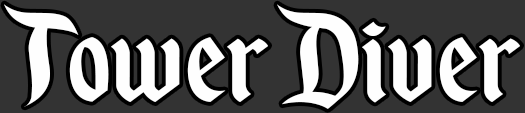
<style>
.page{position:relative;width:525px;height:113px;background:#333333}
.page>*{position:absolute;margin:0}
.t1{font:150px "EnchantedLand";color:#fefefe}
</style>
<div class="page">
<p class="t1" style="left:4px;top:4px;width:517px;height:105px">Tower Diver</p>
</div>
